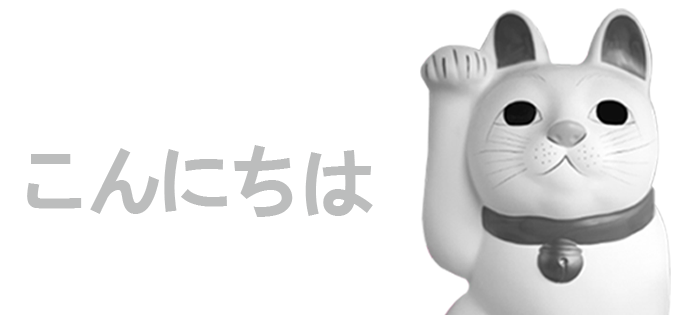
<style>
.page{position:relative;width:680px;height:315px;background:#ffffff}
.page>*{position:absolute;margin:0}
.t1{font:77.1px "MicrosoftYaHei-Bold";letter-spacing:-0.09em;color:#bcbdbd}
</style>
<div class="page">
<p class="t1" style="left:27px;top:145px;width:346px;height:72px">こんにちは</p>
</div>
